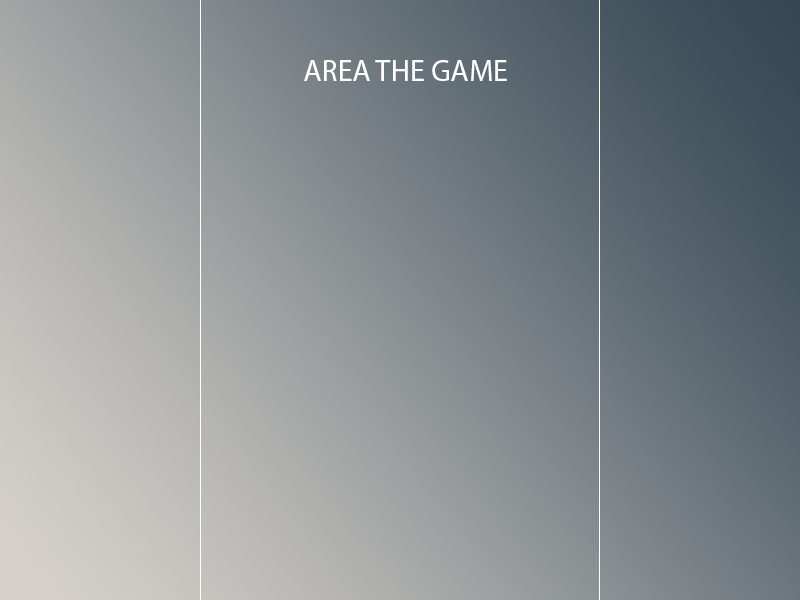
<style>
.page{position:relative;width:800px;height:600px}
.page>*{position:absolute;margin:0}
.t1{font:30px "MyriadPro-Regular";color:#ffffff}
</style>
<div class="page">
<p class="t1" style="left:304px;top:60px;width:203px;height:21px">AREA THE GAME</p>
</div>
